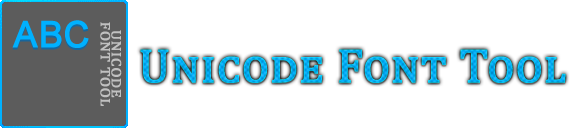
<style>
.page{position:relative;width:575px;height:128px;background:#ffffff}
.page>*{position:absolute;margin:0}
.t1{font:36px "ArialMT";color:#00b1ff;font-variant:small-caps;font-weight:bold}
.t2{font:18px/11px "Cambria";color:#c0c0c0;font-variant:small-caps;font-weight:bold}
.t3{font:48px "Cambria";font-variant:small-caps;font-weight:bold}
</style>
<div class="page">
<p class="t1" style="left:12px;top:20px;width:77px;height:28px">ABC</p>
<p class="t2" style="left:100px;top:22px;width:22px;height:84px;text-align:center;rotate:90deg">unicode<br>font tool</p>
<p class="t3" style="left:140px;top:49px;width:426px;height:34px">Unicode Font Tool</p>
</div>
